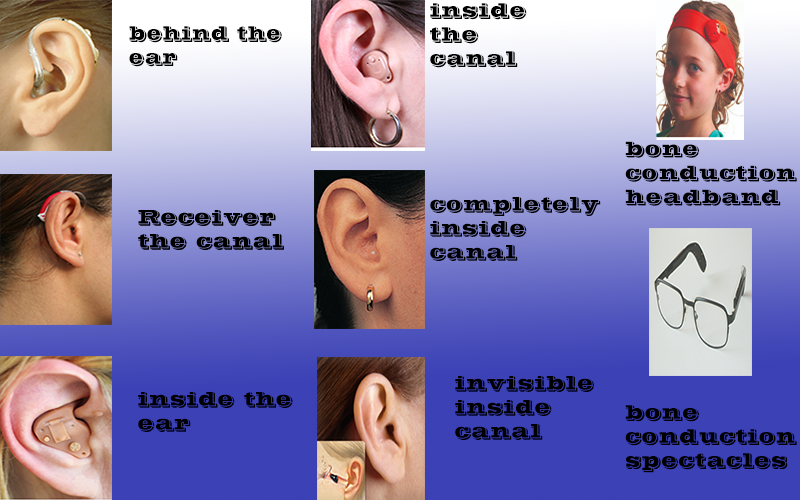
<style>
.page{position:relative;width:800px;height:500px}
.page>*{position:absolute;margin:0}
.t1{font:20px "VinetaBT-Regular";color:#000000}
.t2{font:20px "VinetaBT-Regular";color:#000000;scale:0.92 1}
</style>
<div class="page">
<p class="t1" style="left:430px;top:3px;width:97px;height:65px">insidethe <br>canal</p>
<p class="t2" style="left:129px;top:26px;width:153px;height:41px">behind the ear</p>
<p class="t1" style="left:625px;top:141px;width:172px;height:65px">bone conduction headband</p>
<p class="t1" style="left:430px;top:197px;width:171px;height:64px">completely inside canal</p>
<p class="t1" style="left:455px;top:376px;width:139px;height:64px">invisible inside canal</p>
<p class="t1" style="left:138px;top:392px;width:155px;height:40px">inside the ear</p>
<p class="t1" style="left:625px;top:405px;width:172px;height:68px">bone conduction spectacles</p>
</div>
